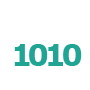
<style>
.page{position:relative;width:90px;height:90px;background:#ffffff}
.page>*{position:absolute;margin:0}
.t1{font:30px "Verdana-Bold";letter-spacing:-0.15em;color:#20a493}
</style>
<div class="page">
<p class="t1" style="left:14px;top:44px;width:68px;height:22px">1010</p>
</div>
